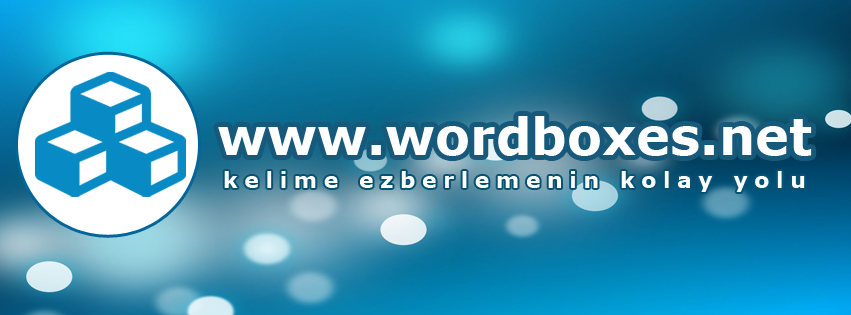
<style>
.page{position:relative;width:851px;height:315px}
.page>*{position:absolute;margin:0}
.t1{font:51px "Verdana-Bold";color:#ffffff}
.t2{font:22px "Verdana-Bold";letter-spacing:0.3em;color:#ffffff}
</style>
<div class="page">
<p class="t1" style="left:218px;top:116px;width:594px;height:40px">www.wordboxes.net</p>
<p class="t2" style="left:224px;top:171px;width:581px;height:21px">kelime ezberlemenin kolay yolu</p>
</div>
